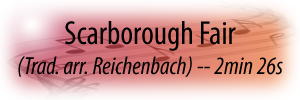
<style>
.page{position:relative;width:300px;height:100px}
.page>*{position:absolute;margin:0}
.t1{font:25px "MyriadPro-CondIt";color:#000000}
.t2{font:33.3px "MyriadPro-Cond";color:#000000}
</style>
<div class="page">
<p class="t1" style="left:18px;top:21px;width:265px;height:56px;text-align:center"><span class="t2">Scarborough Fair<br></span>(Trad. arr. Reichenbach) -- 2min 26s</p>
</div>
